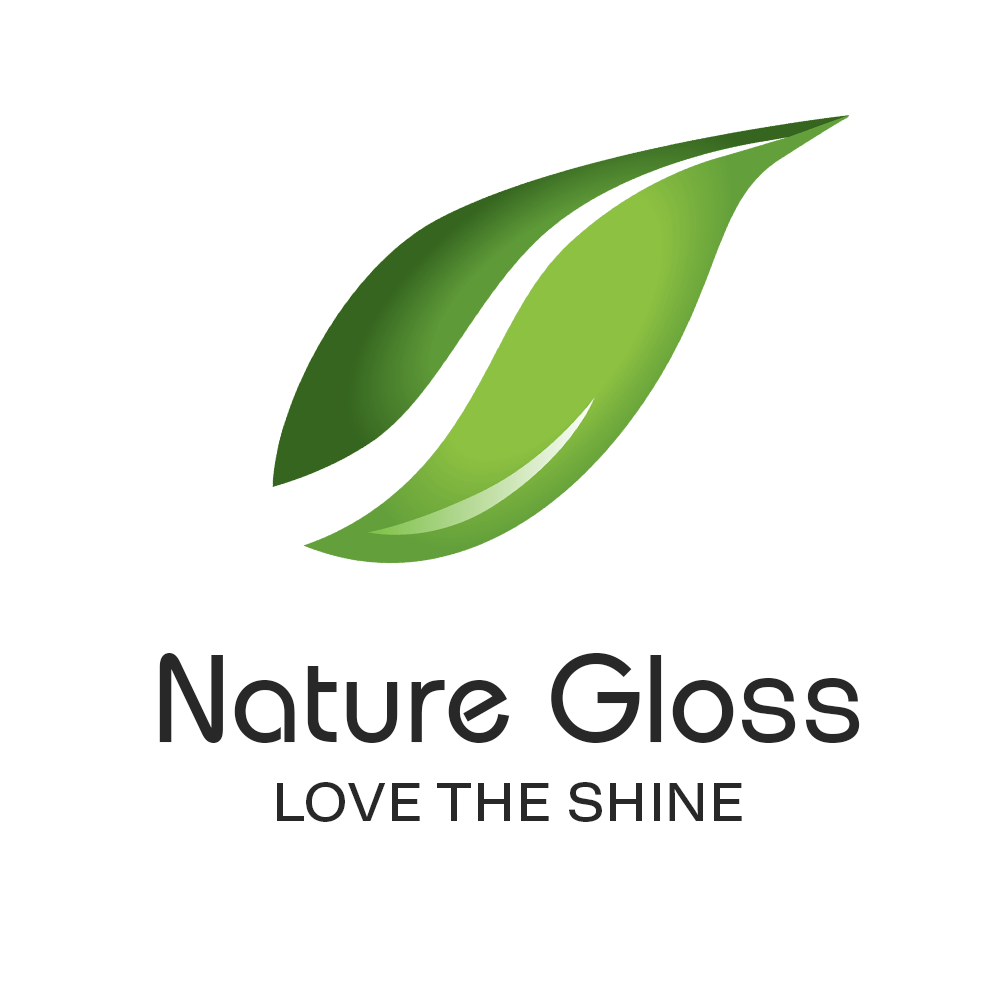
<style>
.page{position:relative;width:1000px;height:1000px;background:#ffffff}
.page>*{position:absolute;margin:0}
.t1{font:125px "BauhausITCbyBT-Medium";color:#282828}
.t2{font:125px "NeogroteskEss-Light";color:#282828}
.t3{font:55.6px "NeogroteskEss-Regular";letter-spacing:0.025em;color:#282828}
</style>
<div class="page">
<p class="t1" style="left:159px;top:653px;width:701px;height:90px">Nature Glo<span class="t2">ss</span></p>
<p class="t3" style="left:277px;top:782px;width:465px;height:40px">LOVE THE SHINE</p>
</div>
